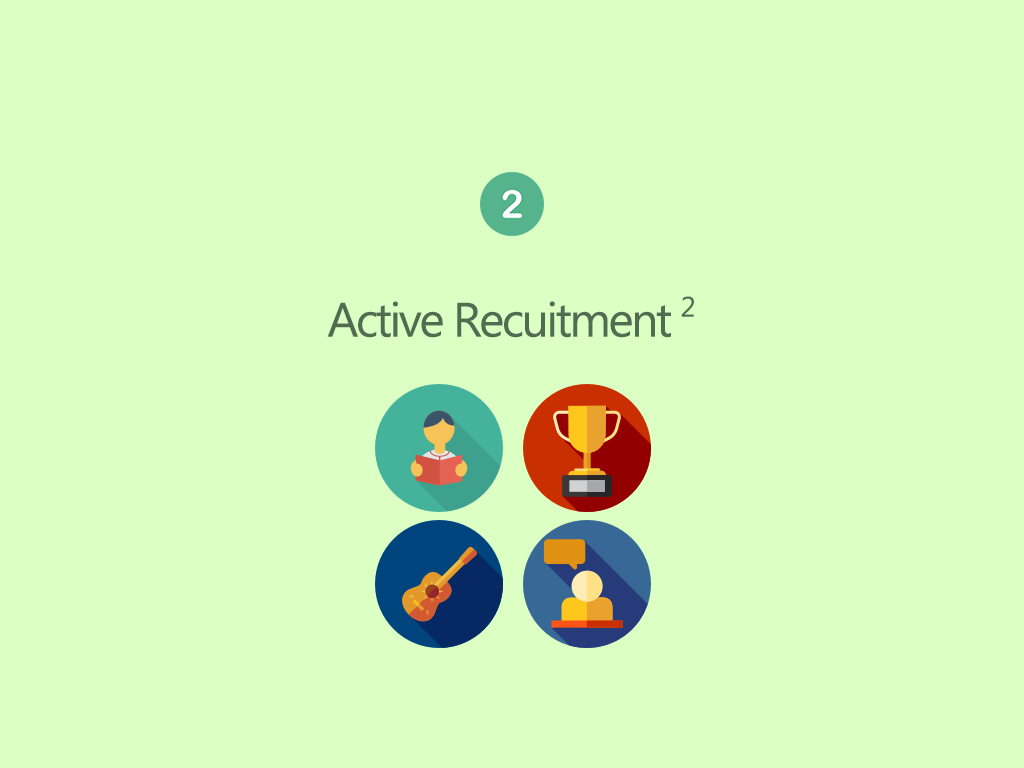
<style>
.page{position:relative;width:1024px;height:768px;background:#dcffc3}
.page>*{position:absolute;margin:0}
.t1{font:48px "MicrosoftTaiLe";letter-spacing:-0.05em;color:#506d52}
.t2{font:28px "MicrosoftTaiLe";letter-spacing:-0.05em;color:#506d52}
</style>
<div class="page">
<p class="t1" style="left:327px;top:296px;width:367px;height:42px">Active Recuitment <span class="t2">2</span></p>
</div>
